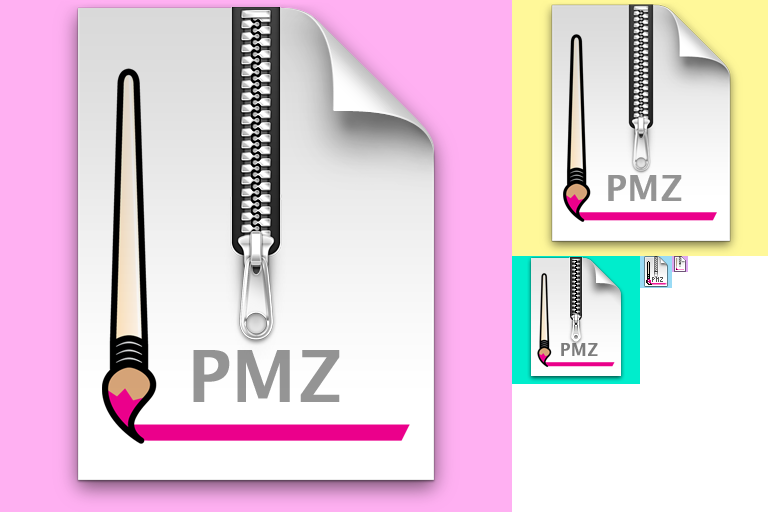
<style>
.page{position:relative;width:768px;height:512px;background:#ffffff}
.page>*{position:absolute;margin:0}
.t1{font:36px "LucidaGrande-Bold";color:#959595}
.t2{font:7px "KKFixed4x7";color:#555555}
.t3{font:72px "LucidaGrande-Bold";color:#959595}
.t4{font:18px "LucidaGrande-Bold";color:#7d7d7d}
</style>
<div class="page">
<p class="t1" style="left:608px;top:175px;width:74px;height:26px">PMZ</p>
<p class="t2" style="left:652px;top:277px;width:11px;height:5px">PMZ</p>
<p class="t3" style="left:193px;top:350px;width:147px;height:52px">PMZ</p>
<p class="t4" style="left:561px;top:343px;width:37px;height:13px">PMZ</p>
</div>
